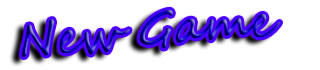
<style>
.page{position:relative;width:320px;height:70px;background:#ffffff}
.page>*{position:absolute;margin:0}
.t1{font:45px "SegoeScript"}
</style>
<div class="page">
<p class="t1" style="left:22px;top:9px;width:259px;height:48px">New Game</p>
</div>
